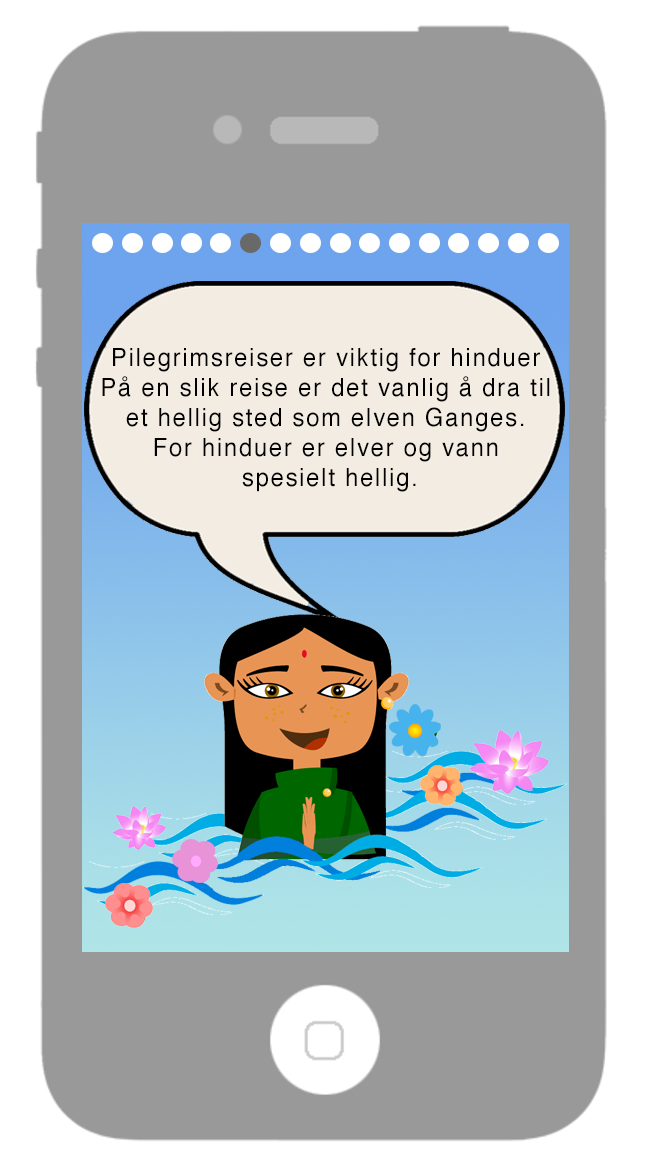
<style>
.page{position:relative;width:646px;height:1172px;background:#999999}
.page>*{position:absolute;margin:0}
.t1{font:12px "Helvetica";letter-spacing:0.075em;color:#010101;scale:0.95 1}
</style>
<div class="page">
<p class="t1" style="left:102px;top:348px;width:448px;height:144px;text-align:center">Pilegrimsreiser er viktig for hinduer<br>På en slik reise er det vanlig å dra til<br>et hellig sted som elven Ganges.<br>For hinduer er elver og vann<br> spesielt hellig.</p>
</div>
